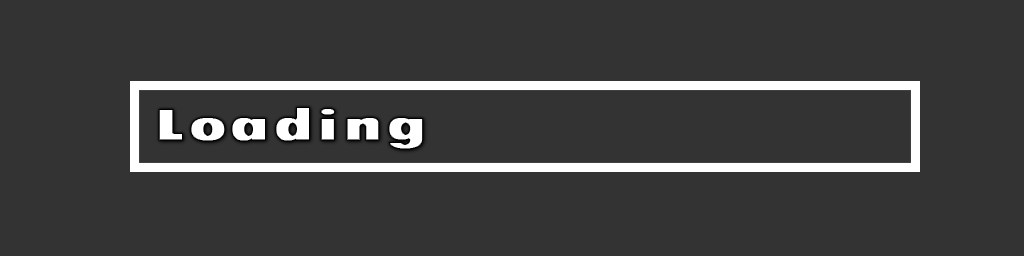
<style>
.page{position:relative;width:1024px;height:256px;background:#333333}
.page>*{position:absolute;margin:0}
.t1{font:48px "TwCenMT-CondensedExtraBold";letter-spacing:0.025em;color:#ffffff;font-weight:bold;scale:1.73 1}
</style>
<div class="page">
<p class="t1" style="left:158px;top:107px;width:266px;height:43px">Loading</p>
</div>
